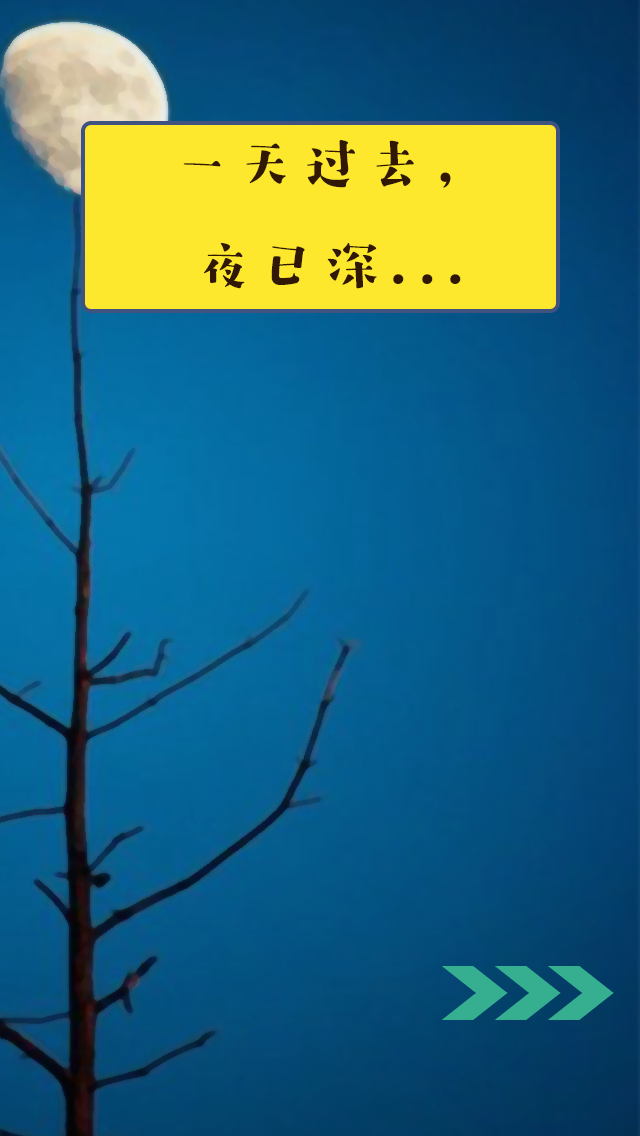
<style>
.page{position:relative;width:640px;height:1136px}
.page>*{position:absolute;margin:0}
.t1{font:58.3px "HYZiYanHuanLeSongW";letter-spacing:0.1em;color:#301805}
</style>
<div class="page">
<p class="t1" style="left:183px;top:140px;width:278px;height:149px;text-align:center">一天过去，<br>夜已深...</p>
</div>
